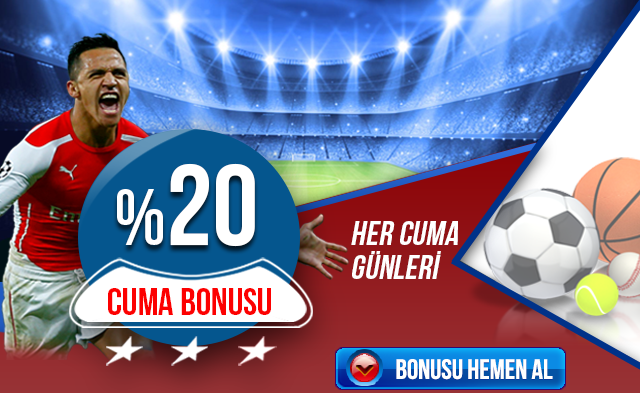
<style>
.page{position:relative;width:640px;height:393px}
.page>*{position:absolute;margin:0}
.t1{font:114px "BebasNeue";color:#ffffff;text-transform:uppercase}
.t2{font:80.6px "BebasNeue";color:#ffffff;text-transform:uppercase}
.t3{font:33.5px/22px "BebasNeue";letter-spacing:0.01em;color:#ffffff;font-style:italic}
.t4{font:37.6px "BebasNeue";color:#fc0101;text-transform:uppercase}
.t5{font:27.8px "BebasNeue";color:#ffffff;text-transform:uppercase}
</style>
<div class="page">
<p class="t1" style="left:117px;top:163px;width:138px;height:84px"><span class="t2">%</span>20</p>
<p class="t3" style="left:351px;top:221px;width:107px;height:58px">her cuma<br>gÜNLERİ</p>
<p class="t4" style="left:108px;top:288px;width:163px;height:27px">cuma bonusu</p>
<p class="t5" style="left:396px;top:359px;width:157px;height:21px">bonusu hemen al</p>
</div>
